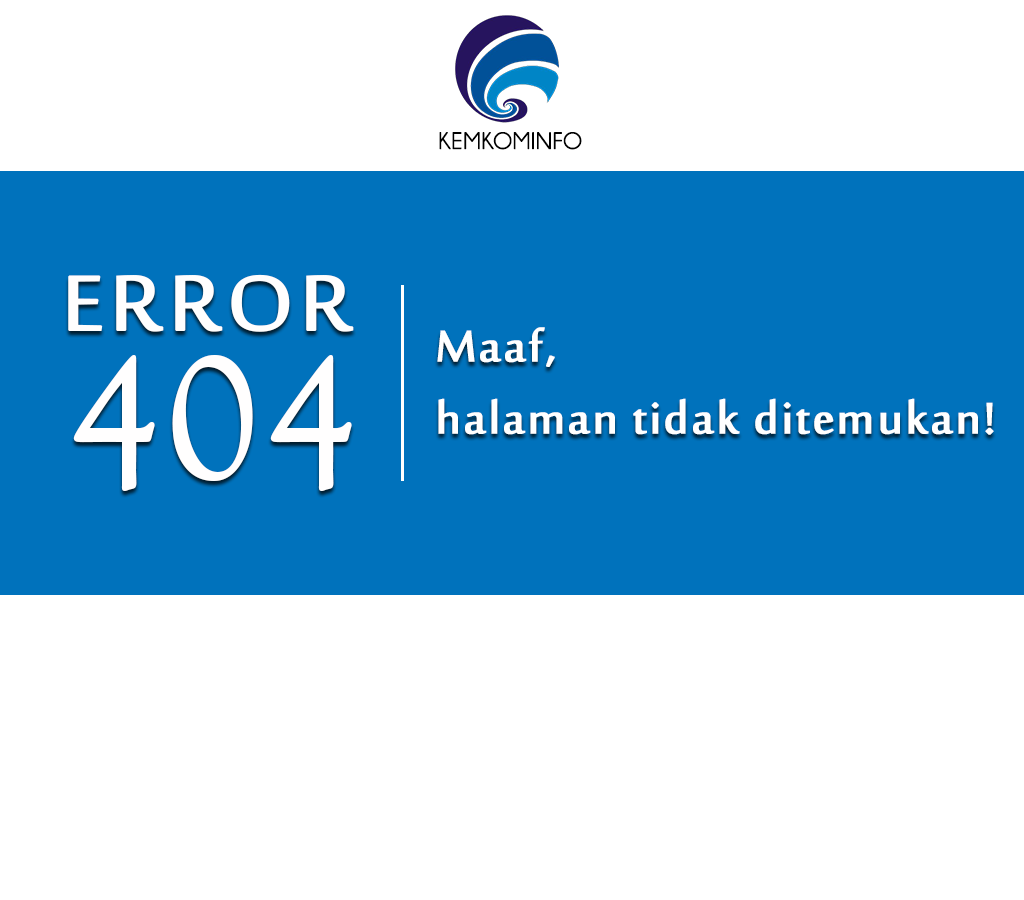
<style>
.page{position:relative;width:1024px;height:900px;background:#ffffff}
.page>*{position:absolute;margin:0}
.t1{font:23.5px "Champagne&Limousines";letter-spacing:0.025em;color:#010000;font-weight:bold}
.t2{font:107.4px "SakkalMajalla";letter-spacing:0.025em;color:#fffefe;font-weight:bold;scale:1.09 1}
.t3{font:60.5px "SakkalMajalla";letter-spacing:0.025em;color:#ffffff;font-weight:bold}
.t4{font:179.1px "GoudyOldStyleT-Regular";letter-spacing:0.025em;color:#fffefe;font-weight:bold}
</style>
<div class="page">
<p class="t1" style="left:439px;top:132px;width:143px;height:18px">KEMKOMINFO</p>
<p class="t2" style="left:68px;top:274px;width:286px;height:58px">ERROR</p>
<p class="t3" style="left:437px;top:327px;width:557px;height:108px">Maaf, <br>halaman tidak ditemukan!</p>
<p class="t4" style="left:73px;top:355px;width:279px;height:136px">404</p>
</div>
